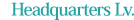
<style>
.page{position:relative;width:134px;height:20px;background:#ffffff}
.page>*{position:absolute;margin:0}
.t1{font:18px "HeiseiMinStd-W7";letter-spacing:-0.04em;color:#25a2a2}
</style>
<div class="page">
<p class="t1" style="left:11px;top:2px;width:123px;height:18px">Headquarters Lv.</p>
</div>
